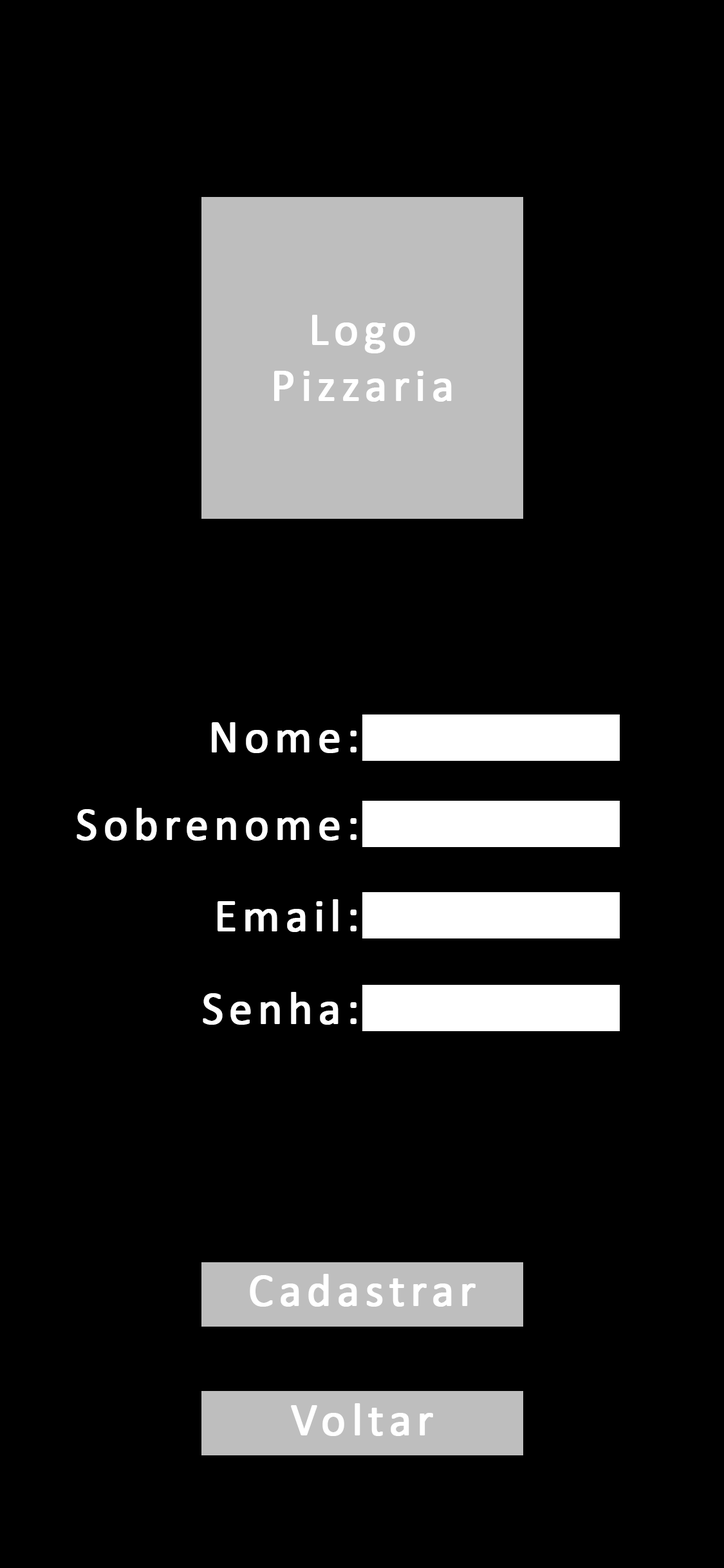
<style>
.page{position:relative;width:724px;height:1568px;background:#000000}
.page>*{position:absolute;margin:0}
.t1{font:46.3px "Calibri";letter-spacing:0.1em;color:#ffffff;font-weight:bold}
</style>
<div class="page">
<p class="t1" style="left:274px;top:315px;width:178px;height:87px;text-align:center">Logo<br>Pizzaria</p>
<p class="t1" style="left:212px;top:722px;width:145px;height:31px">Nome:</p>
<p class="t1" style="left:77px;top:808px;width:280px;height:33px">Sobrenome:</p>
<p class="t1" style="left:218px;top:899px;width:139px;height:33px">Email:</p>
<p class="t1" style="left:203px;top:992px;width:154px;height:33px">Senha:</p>
<p class="t1" style="left:250px;top:1274px;width:226px;height:33px">Cadastrar</p>
<p class="t1" style="left:291px;top:1403px;width:142px;height:33px">Voltar</p>
</div>
